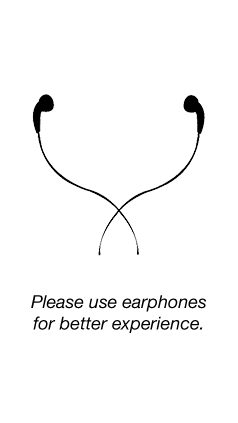
<style>
.page{position:relative;width:238px;height:423px;background:#ffffff}
.page>*{position:absolute;margin:0}
.t1{font:18px "HelveticaNeue-Italic";color:#000000}
</style>
<div class="page">
<p class="t1" style="left:31px;top:295px;width:175px;height:38px;text-align:center">Please use earphones<br>for better experience.</p>
</div>
